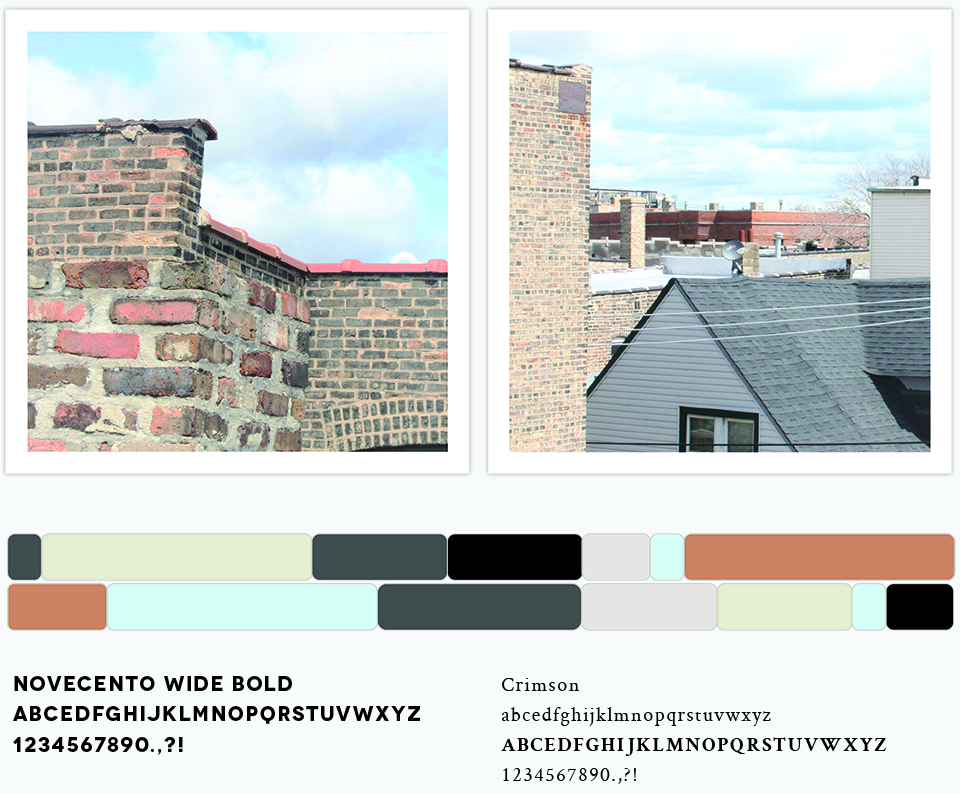
<style>
.page{position:relative;width:960px;height:794px;background:#f8fbfc}
.page>*{position:absolute;margin:0}
.t1{font:20.2px/30.2px "Novecentowide-Bold";letter-spacing:0.075em;color:#000000}
.t2{font:20.2px/30.2px "Crimson-Roman";letter-spacing:0.075em;color:#000000}
.t3{font:20.2px/30.2px "Crimson-Bold";letter-spacing:0.075em;color:#000000;text-transform:uppercase}
</style>
<div class="page">
<p class="t1" style="left:13px;top:676px;width:407px;height:79px">novecento wide bold<br>abcedfghijklmnopqrstuvwxyz<br>1234567890.,?!</p>
<p class="t2" style="left:501px;top:678px;width:386px;height:106px">Crimson<br>abcedfghijklmnopqrstuvwxyz<br><span class="t3">abcedfghijklmnopqrstuvwxyz<br></span>1234567890.,?!</p>
</div>
